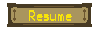
<style>
.page{position:relative;width:100px;height:30px;background:#ffffff}
.page>*{position:absolute;margin:0}
.t1{font:12.5px "KarmaSuture-Regular";color:#f8e40a}
</style>
<div class="page">
<p class="t1" style="left:29px;top:10px;width:43px;height:11px">Resume</p>
</div>
